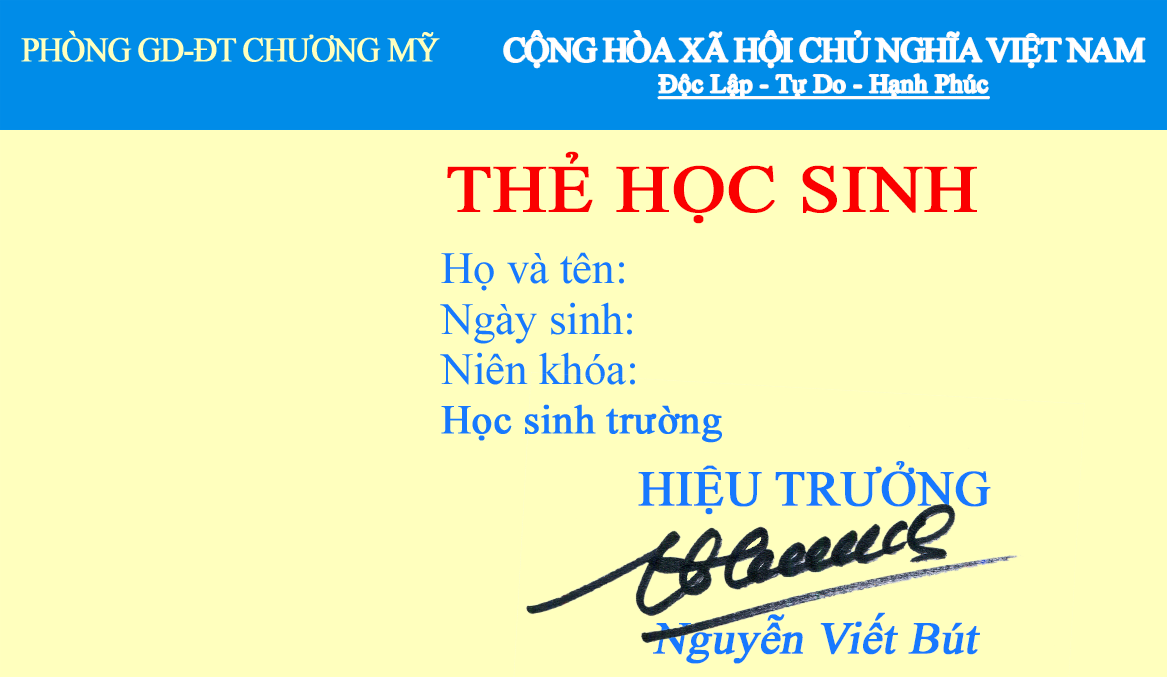
<style>
.page{position:relative;width:1167px;height:677px;background:#ffffbe}
.page>*{position:absolute;margin:0}
.t1{font:33.7px "TimesNewRomanPSMT";letter-spacing:-0.05em;color:#ffffff;font-weight:bold}
.t2{font:25.6px "TimesNewRomanPSMT";color:#ffffff;font-weight:bold;text-decoration:underline}
.t3{font:66.7px "TimesNewRomanPSMT";color:#fa0000;font-weight:bold;scale:1.11 1}
.t4{font:45.3px/49.4px "TimesNewRomanPSMT";color:#1779fe;font-weight:bold;font-style:italic}
.t5{font:49.4px/49.4px "TimesNewRomanPSMT";color:#1779fe;font-weight:bold}
</style>
<div class="page">
<p class="t1" style="left:504px;top:31px;width:641px;height:68px;text-align:center">CỘNG HÒA XÃ HỘI CHỦ NGHĨA VIỆT NAM<br><span class="t2">Độc Lập - Tự Do - Hạnh Phúc</span></p>
<p class="t3" style="left:447px;top:151px;width:530px;height:73px">THẺ HỌC SINH</p>
<p class="t4" style="left:638px;top:461px;width:353px;height:203px;text-align:center"><span class="t5">HIỆU TRƯỞNG<br><br><br></span>Nguyễn Viết Bút</p>
</div>
